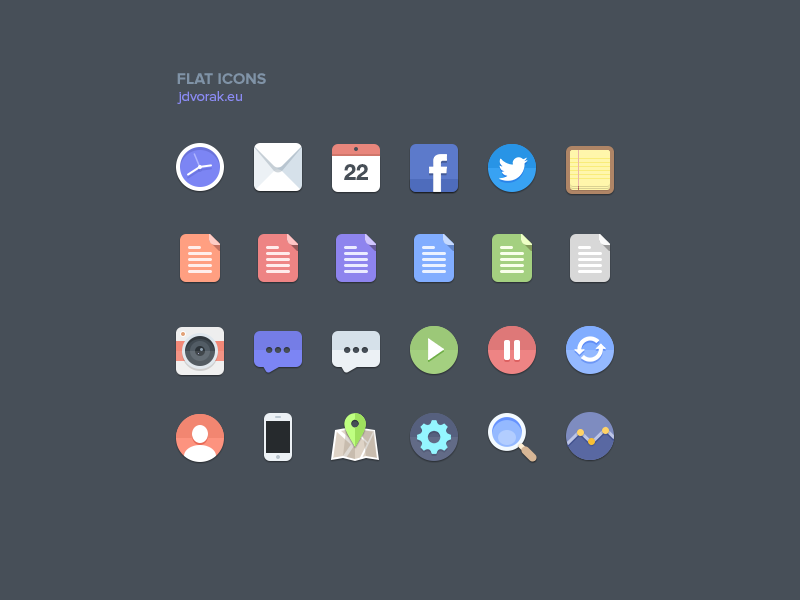
<style>
.page{position:relative;width:800px;height:600px;background:#474f58}
.page>*{position:absolute;margin:0}
.t1{font:16px "ProximaNova-Bold";color:#8092a6;text-transform:uppercase}
.t2{font:14px "ProximaNova-Regular";color:#8c8cf4}
.t3{font:22px "HelveticaNeue-Bold";color:#474f57}
</style>
<div class="page">
<p class="t1" style="left:177px;top:73px;width:89px;height:11px">Flat Icons</p>
<p class="t2" style="left:177px;top:91px;width:65px;height:13px">jdvorak.eu</p>
<p class="t3" style="left:344px;top:164px;width:24px;height:16px">22</p>
</div>
